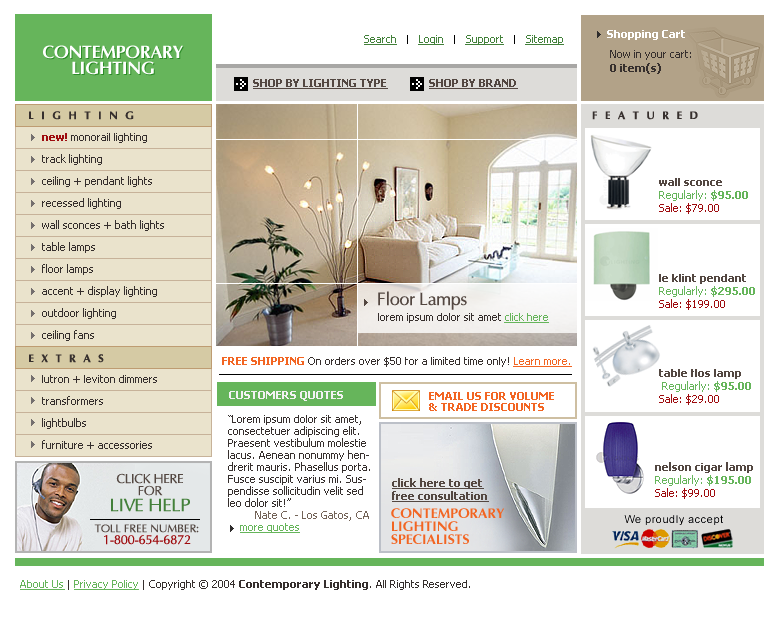
<style>
.page{position:relative;width:780px;height:620px;background:#ffffff}
.page>*{position:absolute;margin:0}
.t1{font:11px "Tahoma-Bold";color:#ffffff}
.t2{font:11px "Tahoma";color:#42803a;text-decoration:underline}
.t3{font:9px "Tahoma";color:#000000}
.t4{font:18px/16px "AGOptimaBold";letter-spacing:-0.025em;color:#ffffff;text-transform:uppercase}
.t5{font:11px/14px "Tahoma";color:#362f2d}
.t6{font:11px/14px "Tahoma-Bold";color:#362f2d}
.t7{font:11px "Tahoma-Bold";color:#534741;text-transform:uppercase;text-decoration:underline}
.t8{font:11px "AGOptimaBold";letter-spacing:0.68em;color:#362f2d;text-transform:uppercase}
.t9{font:11px/22px "Tahoma";color:#362f2d}
.t10{font:11px/22px "Tahoma-Bold";color:#9e0b0e}
.t11{font:11px/13px "Tahoma";color:#9e0b0e}
.t12{font:11px/13px "Tahoma-Bold";color:#534741}
.t13{font:11px/13px "Tahoma";color:#66b55b}
.t14{font:11px/13px "Tahoma-Bold";color:#66b55b}
.t15{font:18px "Optima";letter-spacing:-0.025em;color:#534741}
.t16{font:11px "Tahoma";color:#362f2d}
.t17{font:11px "Tahoma";color:#66b55b;text-decoration:underline}
.t18{font:11px "Tahoma-Bold";color:#f26522;text-transform:uppercase}
.t19{font:11px "Tahoma";color:#f26522;text-decoration:underline}
.t20{font:11px "Tahoma-Bold";color:#f2f2f2;text-transform:uppercase}
.t21{font:11px/11px "Tahoma-Bold";color:#f26522;text-transform:uppercase}
.t22{font:11px/12px "Tahoma";color:#362f2d}
.t23{font:11px/12px "Tahoma";color:#736357}
.t24{font:11px/12px "Tahoma";color:#66b55b;text-decoration:underline}
.t25{font:13px/12px "Optima";letter-spacing:-0.025em;color:#534741;text-transform:uppercase}
.t26{font:18px/16px "Optima";letter-spacing:-0.025em;color:#43803a;text-transform:uppercase;font-weight:bold}
.t27{font:11px/13px "Tahoma-Bold";color:#534741;text-decoration:underline}
.t28{font:14px/13px "AGOptimaBold";color:#f26522;text-transform:uppercase}
.t29{font:11px/12px "Optima";letter-spacing:-0.025em;color:#534741;text-transform:uppercase;font-weight:bold}
.t30{font:13px/12px "Optima";letter-spacing:-0.025em;color:#9e0b0e;text-transform:uppercase}
.t31{font:11px "Tahoma-Bold";color:#362f2d}
</style>
<div class="page">
<p class="t1" style="left:607px;top:30px;width:78px;height:10px">Shopping Cart</p>
<p class="t2" style="left:364px;top:35px;width:200px;height:10px">Search   <span class="t3">|   </span>Login   <span class="t3">|   </span>Support   <span class="t3">|   </span>Sitemap</p>
<p class="t4" style="left:43px;top:45px;width:140px;height:30px;text-align:center">Contemporary<br>Lighting</p>
<p class="t5" style="left:610px;top:50px;width:81px;height:24px">Now in your cart:<br><span class="t6">0 item(s)</span></p>
<p class="t7" style="left:253px;top:79px;width:135px;height:10px">shop by lighting type</p>
<p class="t7" style="left:429px;top:79px;width:89px;height:10px">shop by brand</p>
<p class="t8" style="left:29px;top:111px;width:105px;height:9px">lighting</p>
<p class="t8" style="left:592px;top:111px;width:106px;height:9px">featured</p>
<p class="t9" style="left:42px;top:133px;width:122px;height:208px"><span class="t10">new!</span> monorail lighting<br>track lighting<br>ceiling + pendant lights<br>recessed lighting<br>wall sconces + bath lights<br>table lamps<br>floor lamps<br>accent + display lighting<br>outdoor lighting<br>ceiling fans</p>
<p class="t11" style="left:659px;top:178px;width:89px;height:36px"><span class="t12">wall sconce<br></span><span class="t13">Regularly:</span><span class="t14"> $95.00<br></span>Sale: $79.00</p>
<p class="t12" style="left:659px;top:274px;width:96px;height:36px">le klint pendant <span class="t13">Regularly:</span><span class="t14"> $295.00<br></span><span class="t11">Sale: $199.00</span></p>
<p class="t15" style="left:378px;top:291px;width:89px;height:19px">Floor Lamps</p>
<p class="t16" style="left:378px;top:313px;width:171px;height:10px">lorem ipsum dolor sit amet <span class="t17">click here</span></p>
<p class="t8" style="left:29px;top:354px;width:75px;height:9px">extras</p>
<p class="t16" style="left:222px;top:357px;width:350px;height:10px"><span class="t18">free shipping </span>On orders over $50 for a limited time only! <span class="t19">Learn more.</span></p>
<p class="t9" style="left:42px;top:375px;width:115px;height:74px">lutron + leviton dimmers<br>transformers<br>lightbulbs<br>furniture + accessories</p>
<p class="t12" style="left:659px;top:369px;width:92px;height:36px">table flos lamp<br> <span class="t13">Regularly:</span><span class="t14"> $95.00<br></span><span class="t11">Sale: $29.00</span></p>
<p class="t20" style="left:229px;top:391px;width:114px;height:10px">customers quotes</p>
<p class="t21" style="left:429px;top:392px;width:125px;height:19px">Email us for Volume<br>&amp; Trade Discounts</p>
<p class="t22" style="left:228px;top:415px;width:142px;height:118px">“Lorem ipsum dolor sit amet, consectetuer adipiscing elit. Praesent vestibulum molestie lacus. Aenean nonummy hendrerit mauris. Phasellus porta. Fusce suscipit varius mi. Suspendisse sollicitudin velit sed leo dolor sit!” <br>         <span class="t23">Nate C. - Los Gatos, CA<br>    </span><span class="t24">more quotes</span></p>
<p class="t12" style="left:655px;top:462px;width:98px;height:37px">nelson cigar lamp<br><span class="t13">Regularly:</span><span class="t14"> $195.00<br></span><span class="t11">Sale: $99.00</span></p>
<p class="t25" style="left:111px;top:473px;width:79px;height:39px;text-align:center">Click here<br>for<br><span class="t26">live help</span></p>
<p class="t27" style="left:392px;top:478px;width:97px;height:24px">click here to get free consultation</p>
<p class="t28" style="left:391px;top:508px;width:114px;height:36px">Contemporary<br>Lighting<br>Specialists</p>
<p class="t29" style="left:94px;top:524px;width:105px;height:21px;text-align:center">toll free number:<br><span class="t30">1-800-654-6872</span></p>
<p class="t16" style="left:20px;top:580px;width:450px;height:10px"><span class="t17">About Us</span> | <span class="t17">Privacy Policy</span> | Copyright © 2004 <span class="t31">Contemporary Lighting</span>. All Rights Reserved.</p>
</div>
